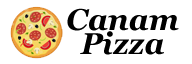
<style>
.page{position:relative;width:192px;height:64px;background:#ffffff}
.page>*{position:absolute;margin:0}
.t1{font:30px/24px "Georgia-BoldItalic";letter-spacing:0.005em;color:#000000}
</style>
<div class="page">
<p class="t1" style="left:67px;top:8px;width:112px;height:47px;text-align:center">Canam<br>Pizza</p>
</div>
